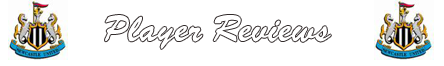
<style>
.page{position:relative;width:444px;height:66px;background:#ffffff}
.page>*{position:absolute;margin:0}
.t1{font:36px "Signature-Regular";color:#ffffff}
</style>
<div class="page">
<p class="t1" style="left:105px;top:15px;width:226px;height:34px">Player Reviews</p>
</div>
